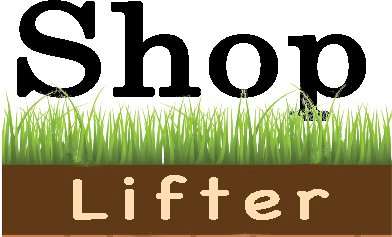
<style>
.page{position:relative;width:392px;height:237px;background:#ffffff}
.page>*{position:absolute;margin:0}
.t1{font:125px "Century";color:#000000;font-weight:bold;scale:1.2 1}
.t2{font:58.3px "Chalkboard";letter-spacing:0.13em;color:#ffdeb4;font-weight:bold;scale:1.3 1}
</style>
<div class="page">
<p class="t1" style="left:17px;top:0px;width:349px;height:121px">Shop</p>
<p class="t2" style="left:73px;top:175px;width:256px;height:45px">Lifter</p>
</div>
